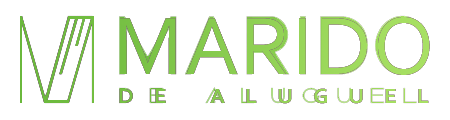
<style>
.page{position:relative;width:450px;height:120px;background:#ffffff}
.page>*{position:absolute;margin:0}
.t1{font:85.6px "Corbel";letter-spacing:0.02em;color:#91d154}
.t2{font:21.4px "Corbel-Bold";letter-spacing:0.86em;color:#94d357;scale:1.07 1}
</style>
<div class="page">
<p class="t1" style="left:120px;top:17px;width:310px;height:58px">MARIDO</p>
<p class="t2" style="left:119px;top:88px;width:310px;height:16px">DE ALUGUEL</p>
</div>
